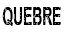
<style>
.page{position:relative;width:64px;height:32px;background:#ffffff}
.page>*{position:absolute;margin:0}
.t1{font:25.1px "Arial-BoldMT";color:#000000;scale:0.55 1}
</style>
<div class="page">
<p class="t1" style="left:2px;top:7px;width:59px;height:19px">QUEBRE</p>
</div>
